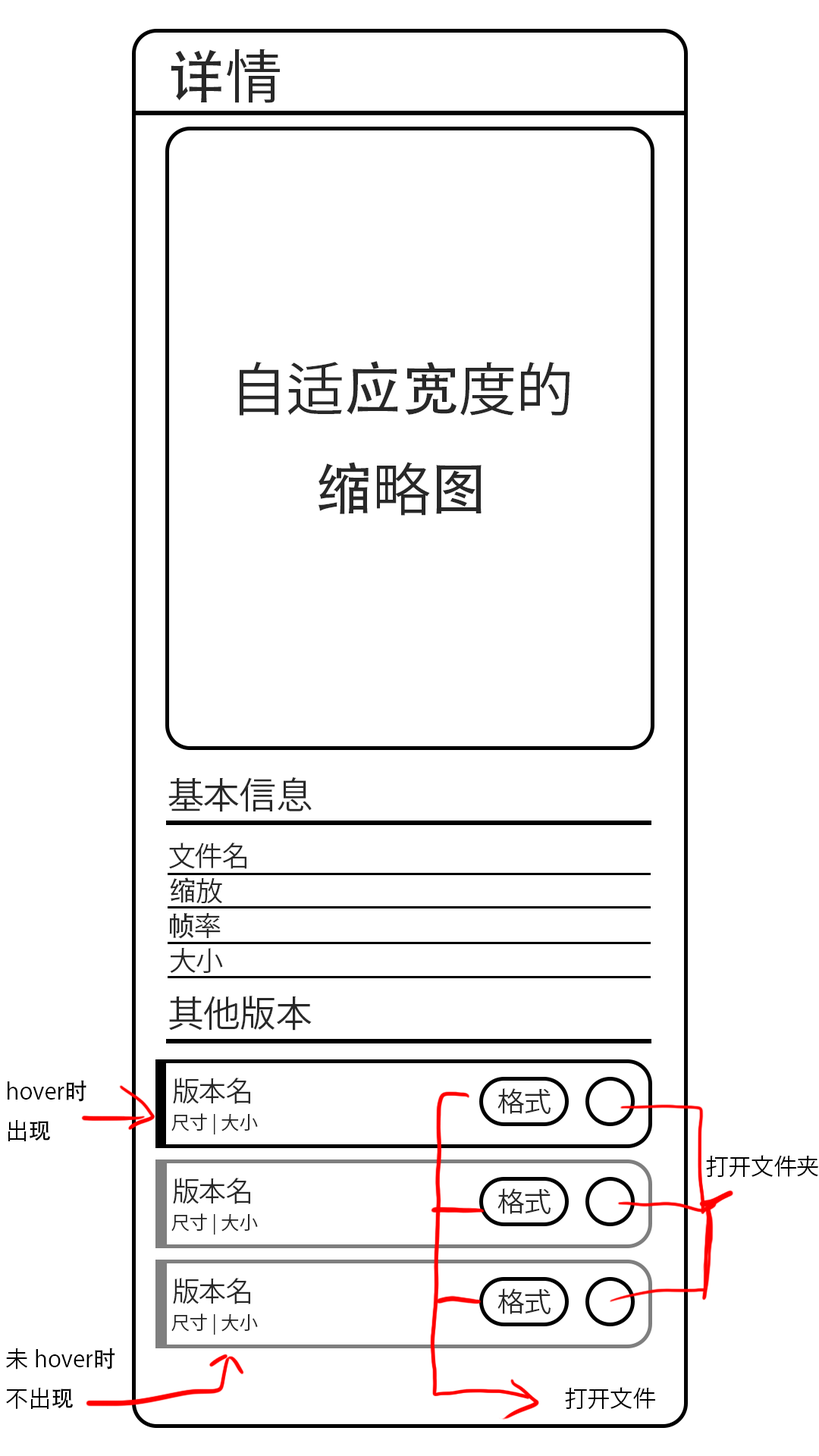
<style>
.page{position:relative;width:819px;height:1456px;background:#ffffff}
.page>*{position:absolute;margin:0}
.t1{font:57.3px "AdobeHeitiStd-Regular";color:#282828}
.t2{font:57.3px "KozGoPr6N-Regular";color:#282828}
.t3{font:36.4px "KozGoPr6N-Regular";color:#282828}
.t4{font:27.3px "KozGoPr6N-Regular";color:#282828}
.t5{font:27.3px "AdobeHeitiStd-Regular";color:#282828}
.t6{font:22.7px "KozGoPr6N-Regular";color:#000000}
.t7{font:22.7px "AdobeHeitiStd-Regular";color:#000000}
.t8{font:18.2px "KozGoPr6N-Regular";color:#282828}
</style>
<div class="page">
<p class="t1" style="left:171px;top:49px;width:109px;height:54px">详<span class="t2">情</span></p>
<p class="t2" style="left:240px;top:361px;width:330px;height:155px;text-align:center">自适<span class="t1">应宽</span>度的<br><span class="t1">缩</span>略<span class="t1">图</span></p>
<p class="t3" style="left:168px;top:777px;width:144px;height:35px">基本信息</p>
<p class="t4" style="left:169px;top:842px;width:77px;height:27px">文件名</p>
<p class="t5" style="left:170px;top:877px;width:52px;height:27px">缩<span class="t4">放</span></p>
<p class="t5" style="left:169px;top:913px;width:52px;height:26px">帧<span class="t4">率</span></p>
<p class="t4" style="left:170px;top:948px;width:53px;height:25px">大小</p>
<p class="t3" style="left:169px;top:996px;width:143px;height:35px">其他版本</p>
<p class="t6" style="left:8px;top:1080px;width:78px;height:61px">hover<span class="t7">时</span><br>出<span class="t7">现</span></p>
<p class="t4" style="left:173px;top:1078px;width:77px;height:26px">版本名</p>
<p class="t4" style="left:497px;top:1088px;width:54px;height:26px">格式</p>
<p class="t8" style="left:171px;top:1113px;width:87px;height:21px">尺寸|大小</p>
<p class="t6" style="left:706px;top:1155px;width:112px;height:23px">打开文件夹</p>
<p class="t4" style="left:173px;top:1178px;width:77px;height:26px">版本名</p>
<p class="t4" style="left:497px;top:1188px;width:54px;height:26px">格式</p>
<p class="t8" style="left:171px;top:1213px;width:87px;height:22px">尺寸|大小</p>
<p class="t4" style="left:173px;top:1278px;width:77px;height:26px">版本名</p>
<p class="t4" style="left:497px;top:1288px;width:54px;height:26px">格式</p>
<p class="t8" style="left:171px;top:1313px;width:87px;height:22px">尺寸|大小</p>
<p class="t6" style="left:6px;top:1348px;width:109px;height:61px">未hover<span class="t7">时</span><br>不出<span class="t7">现</span></p>
<p class="t6" style="left:565px;top:1387px;width:90px;height:23px">打开文件</p>
</div>
